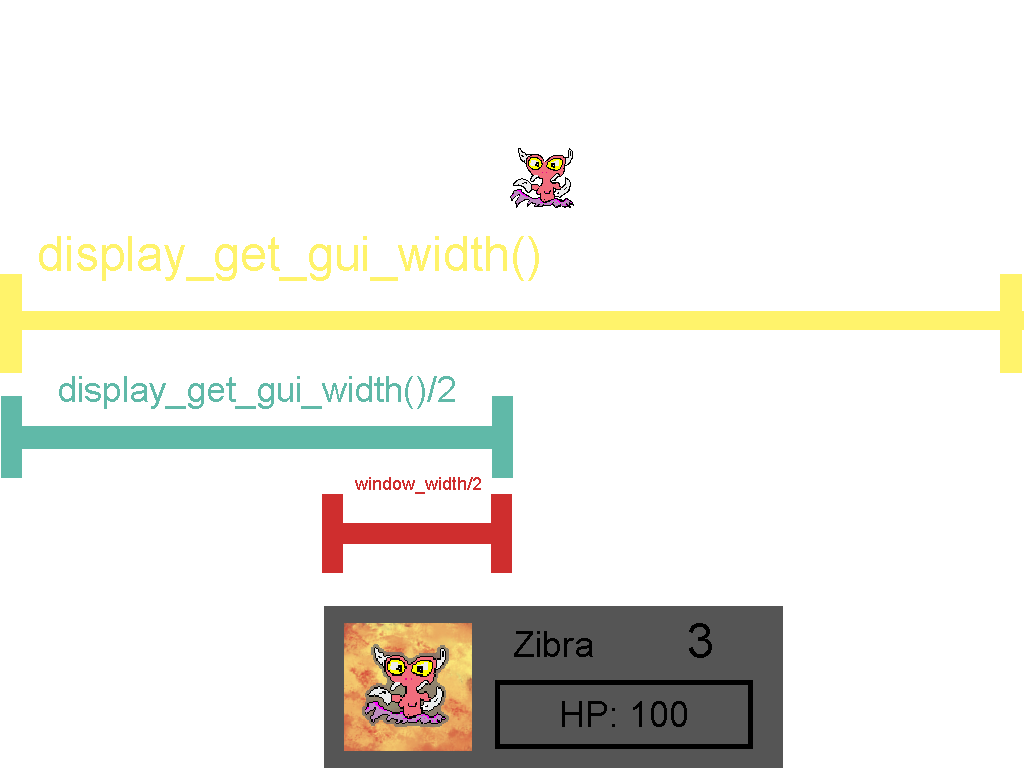
<style>
.page{position:relative;width:1024px;height:768px;background:#ffffff}
.page>*{position:absolute;margin:0}
.t1{font:48px "ArialMT";color:#fff36b}
.t2{font:36px "ArialMT";color:#60b9a8}
.t3{font:18px "ArialMT";color:#cf2e2e}
.t4{font:48px "ArialMT";color:#000000}
.t5{font:36px "ArialMT";color:#000000}
</style>
<div class="page">
<p class="t1" style="left:39px;top:236px;width:500px;height:45px">display_get_gui_width()</p>
<p class="t2" style="left:59px;top:376px;width:396px;height:33px">display_get_gui_width()/2</p>
<p class="t3" style="left:355px;top:477px;width:126px;height:17px">window_width/2</p>
<p class="t4" style="left:689px;top:623px;width:23px;height:35px">3</p>
<p class="t5" style="left:514px;top:631px;width:79px;height:26px">Zibra</p>
<p class="t5" style="left:562px;top:701px;width:125px;height:26px">HP: 100</p>
</div>
